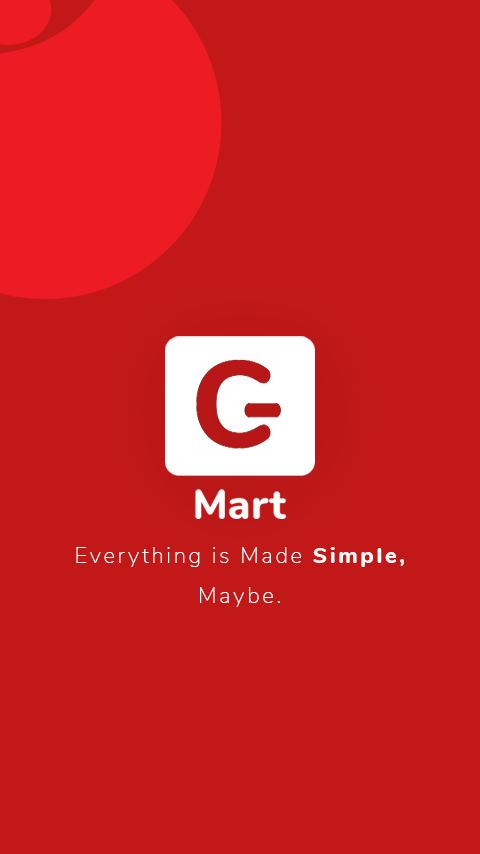
<style>
.page{position:relative;width:480px;height:854px;background:#c31818}
.page>*{position:absolute;margin:0}
.t1{font:22px "Nunito-ExtraLight";letter-spacing:0.12em;color:#ffffff}
.t2{font:22px "Nunito-ExtraBold";letter-spacing:0.12em;color:#ffffff}
</style>
<div class="page">
<p class="t1" style="left:76px;top:547px;width:328px;height:20px">Everything is Made <span class="t2">Simple,</span></p>
<p class="t1" style="left:200px;top:587px;width:80px;height:20px">Maybe.</p>
</div>
